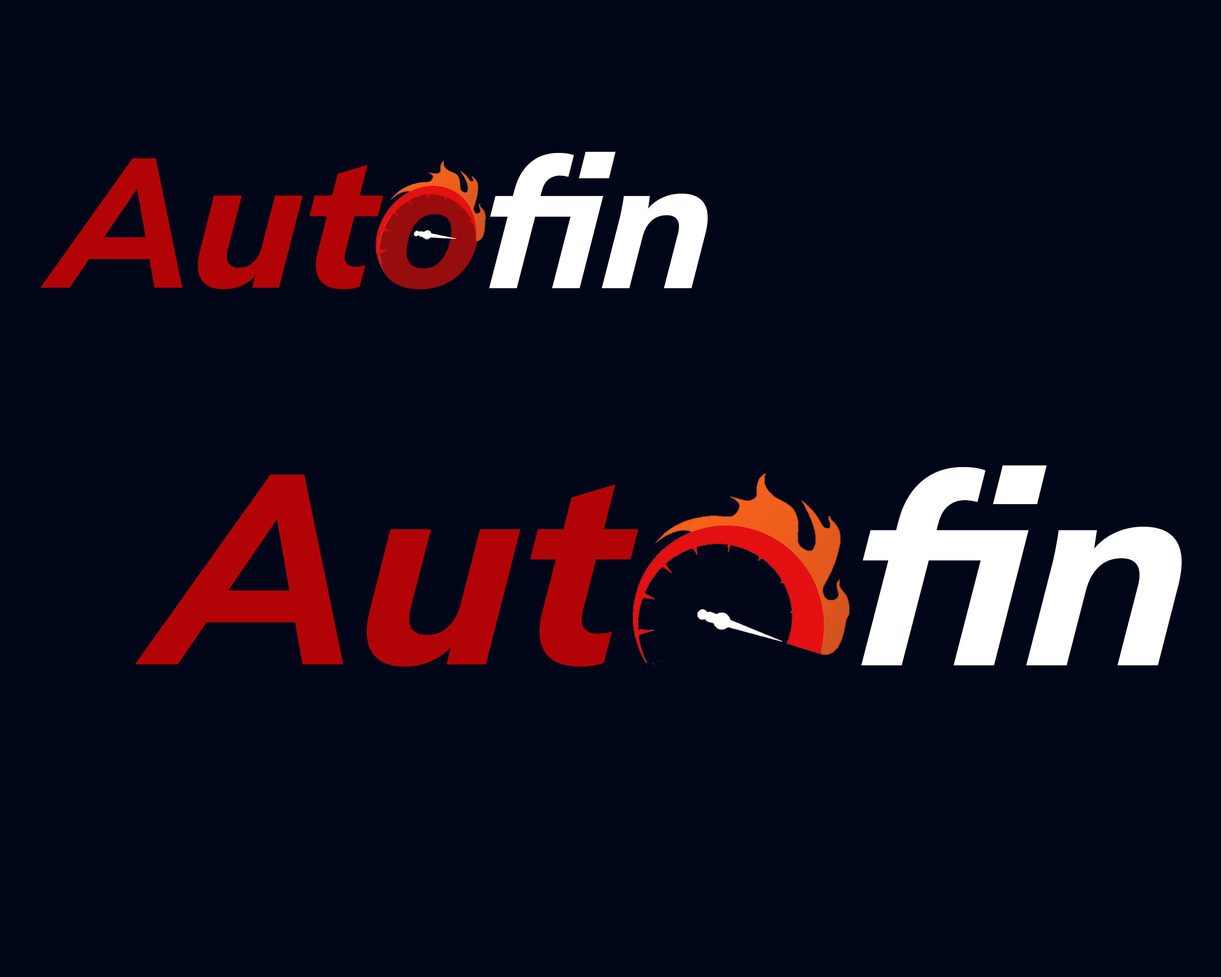
<style>
.page{position:relative;width:1221px;height:977px;background:#000618}
.page>*{position:absolute;margin:0}
.t1{font:181.7px "Muli-ExtraBoldItalic";color:#b20406;font-style:italic}
.t2{font:181.7px "Muli-ExtraBoldItalic";color:#970d0e;font-style:italic}
.t3{font:181.7px "Muli-ExtraBoldItalic";color:#ffffff;font-style:italic}
.t4{font:266.4px "Muli-ExtraBoldItalic";color:#ffffff;font-style:italic}
.t5{font:266.4px "Muli-ExtraBoldItalic";color:#b20406;font-style:italic}
</style>
<div class="page">
<p class="t1" style="left:40px;top:158px;width:439px;height:131px">Aut<span class="t2">o</span></p>
<p class="t3" style="left:489px;top:151px;width:219px;height:137px">fin</p>
<p class="t4" style="left:861px;top:465px;width:321px;height:200px">fin</p>
<p class="t5" style="left:135px;top:474px;width:503px;height:193px">Aut</p>
</div>
